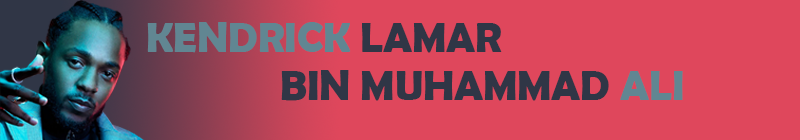
<style>
.page{position:relative;width:800px;height:140px;background:#df475c}
.page>*{position:absolute;margin:0}
.t1{font:41.7px "BerlinSansFBDemi-Bold";color:#618692}
.t2{font:41.7px "BerlinSansFBDemi-Bold";color:#303646}
</style>
<div class="page">
<p class="t1" style="left:147px;top:22px;width:355px;height:31px">KENDRICK <span class="t2">LAMAR</span></p>
<p class="t2" style="left:281px;top:70px;width:402px;height:31px">BIN MUHAMMAD<span class="t1"> ALI</span></p>
</div>
